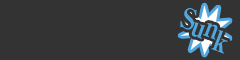
<style>
.page{position:relative;width:240px;height:60px;background:#333333}
.page>*{position:absolute;margin:0}
.t1{font:28px "RyuminPro-ExBold";letter-spacing:-0.08em;color:#50a6dd;scale:0.9 1}
</style>
<div class="page">
<p class="t1" style="left:180px;top:8px;width:48px;height:46px;rotate:21deg">Sunk</p>
</div>
